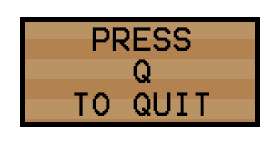
<style>
.page{position:relative;width:279px;height:144px;background:#ffffff}
.page>*{position:absolute;margin:0}
.t1{font:27px "Terminal";color:#000000}
</style>
<div class="page">
<p class="t1" style="left:74px;top:27px;width:135px;height:89px;text-align:center">PRESS<br>Q<br>TO QUIT</p>
</div>
